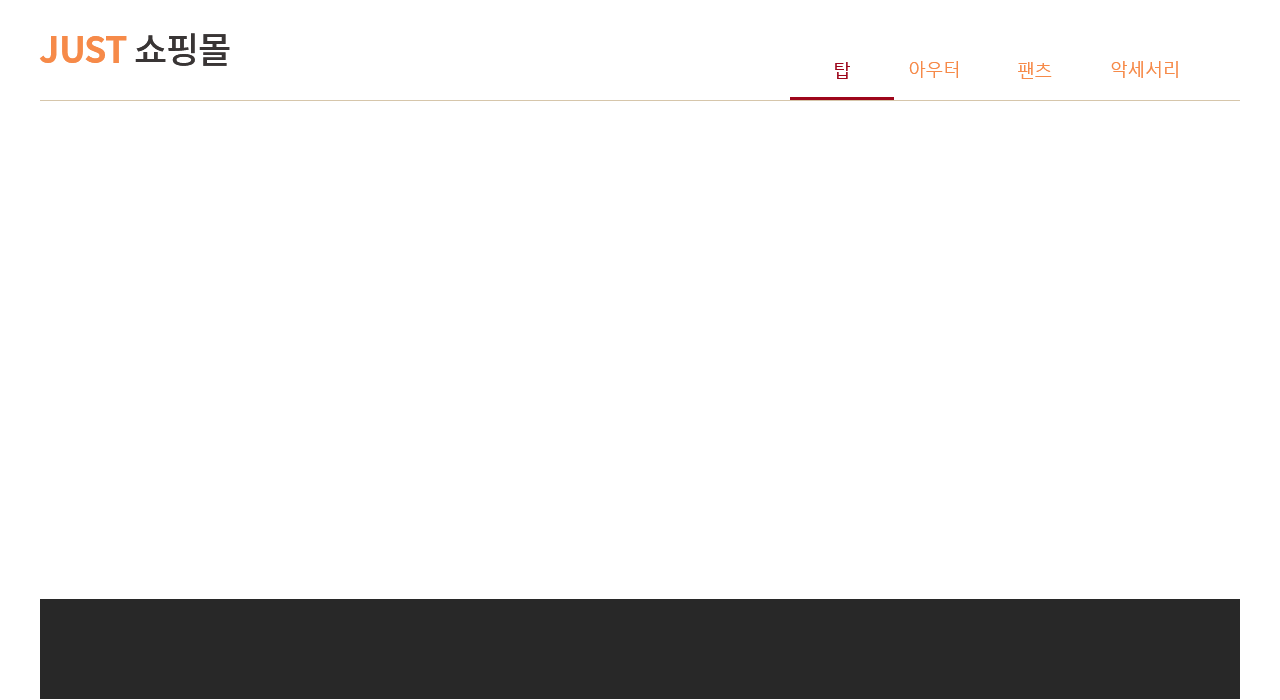
<style>
.page{position:relative;width:1280px;height:700px;background:#ffffff}
.page>*{position:absolute;margin:0}
.t1{font:36px "NotoSansKR-Bold";letter-spacing:-0.025em;color:#f68a49}
.t2{font:36px "NotoSansKR-Medium";letter-spacing:-0.025em;color:#393535}
.t3{font:18px "MalgunGothic";letter-spacing:-0.025em;color:#9e061b}
.t4{font:18px "MalgunGothic";letter-spacing:-0.025em;color:#f68a49}
</style>
<div class="page">
<p class="t1" style="left:39px;top:33px;width:191px;height:33px">JUST <span class="t2">쇼핑몰</span></p>
<p class="t3" style="left:835px;top:62px;width:15px;height:17px">탑</p>
<p class="t4" style="left:909px;top:61px;width:49px;height:17px">아우터</p>
<p class="t4" style="left:1018px;top:62px;width:34px;height:17px">팬츠</p>
<p class="t4" style="left:1111px;top:61px;width:67px;height:17px">악세서리</p>
</div>
